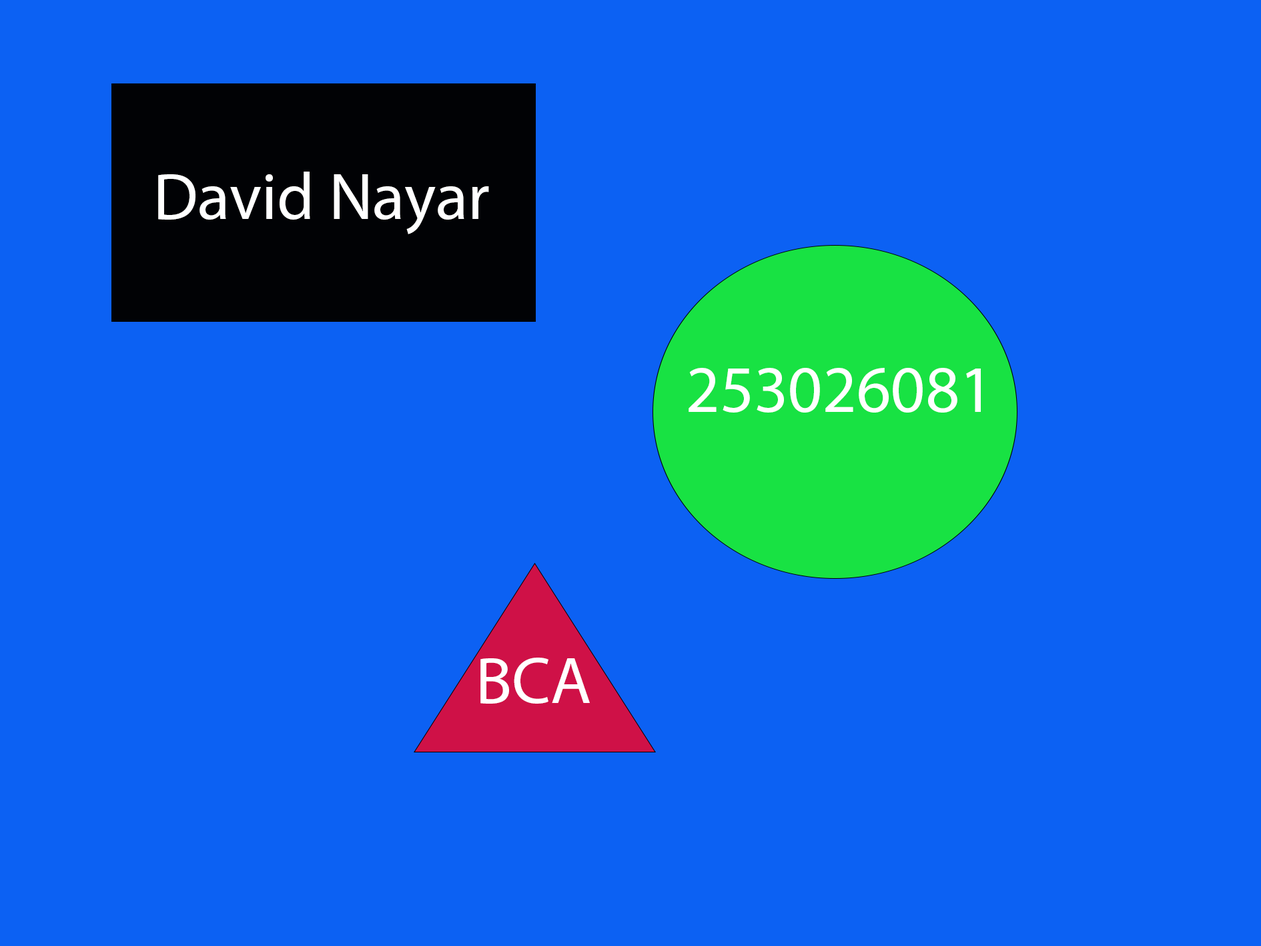
<style>
.page{position:relative;width:1261px;height:946px;background:#0c61f3}
.page>*{position:absolute;margin:0}
.t1{font:66.7px "MyriadPro-Regular";color:#ffffff}
</style>
<div class="page">
<p class="t1" style="left:158px;top:171px;width:331px;height:63px">David Nayar</p>
<p class="t1" style="left:689px;top:368px;width:292px;height:44px">253026081</p>
<p class="t1" style="left:480px;top:657px;width:110px;height:46px">BCA</p>
</div>
